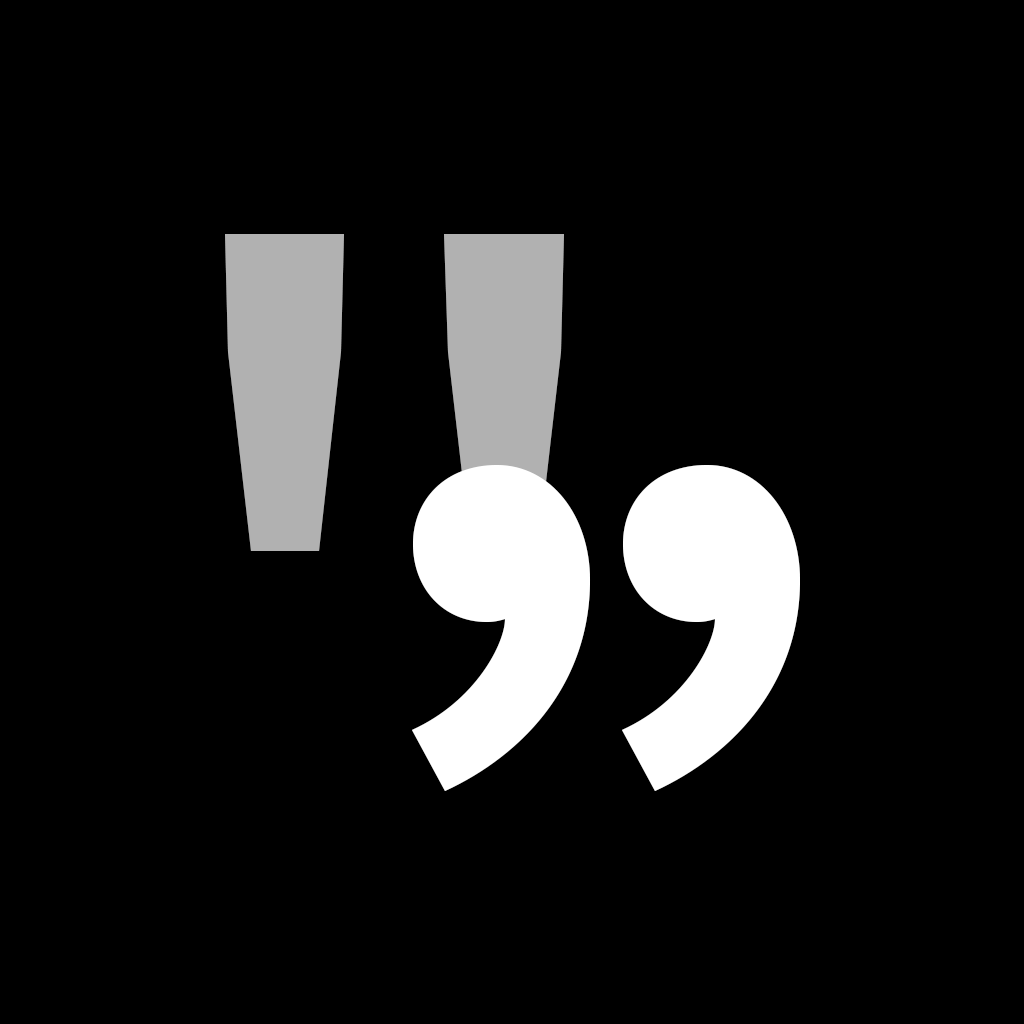
<style>
.page{position:relative;width:1024px;height:1024px;background:#000000}
.page>*{position:absolute;margin:0}
.t1{font:1000px "SourceHanSansSC-Medium";color:#b1b1b1}
.t2{font:1000px "SourceHanSansSC-Heavy";color:#ffffff}
</style>
<div class="page">
<p class="t1" style="left:225px;top:234px;width:339px;height:317px">"</p>
<p class="t2" style="left:412px;top:465px;width:388px;height:326px">”</p>
</div>
